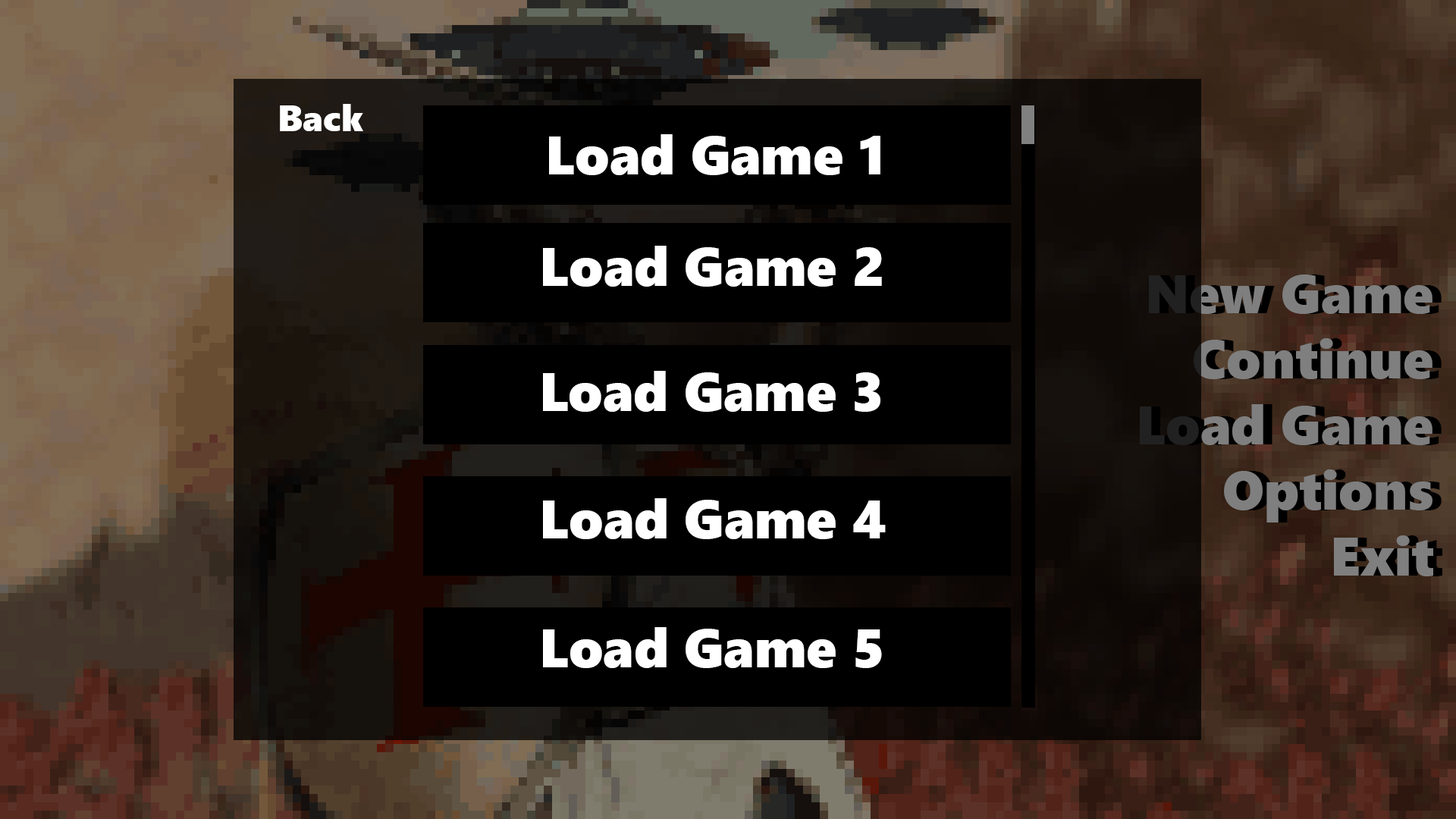
<style>
.page{position:relative;width:1456px;height:819px;background:#000000}
.page>*{position:absolute;margin:0}
.t1{font:36.4px "SegoeUIBlack";color:#ffffff}
.t2{font:54.6px "SegoeUIBlack";color:#ffffff}
.t3{font:54.6px "SegoeUIBlack";color:#7f7f7f}
</style>
<div class="page">
<p class="t1" style="left:280px;top:104px;width:83px;height:27px">Back</p>
<p class="t2" style="left:549px;top:134px;width:331px;height:41px">Load Game 1</p>
<p class="t2" style="left:543px;top:246px;width:339px;height:41px">Load Game 2</p>
<p class="t3" style="left:1140px;top:275px;width:293px;height:301px;text-align:right">New Game<br>Continue<br>Load Game<br>Options<br>Exit</p>
<p class="t2" style="left:543px;top:371px;width:337px;height:41px">Load Game 3</p>
<p class="t2" style="left:543px;top:498px;width:343px;height:41px">Load Game 4</p>
<p class="t2" style="left:543px;top:627px;width:339px;height:41px">Load Game 5</p>
</div>
